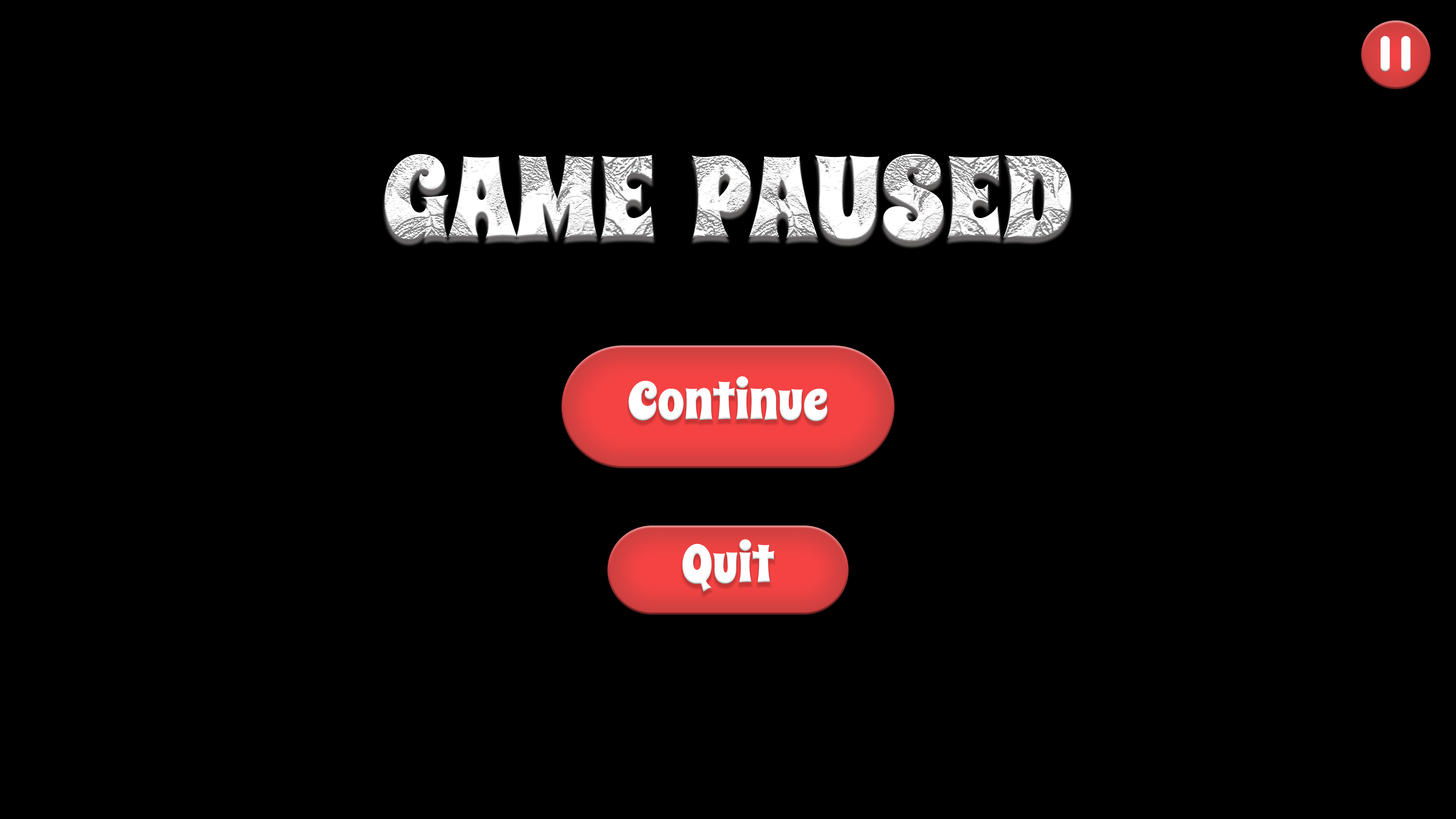
<style>
.page{position:relative;width:1456px;height:819px;background:#000000}
.page>*{position:absolute;margin:0}
.t1{font:113.8px "SpicyRice-Regular";color:#ffffff}
.t2{font:53.1px "SpicyRice-Regular";color:#ffffff}
</style>
<div class="page">
<p class="t1" style="left:384px;top:154px;width:687px;height:88px">GAME  PAUSED</p>
<p class="t2" style="left:628px;top:376px;width:199px;height:46px">Continue</p>
<p class="t2" style="left:682px;top:539px;width:92px;height:54px">Quit</p>
</div>
